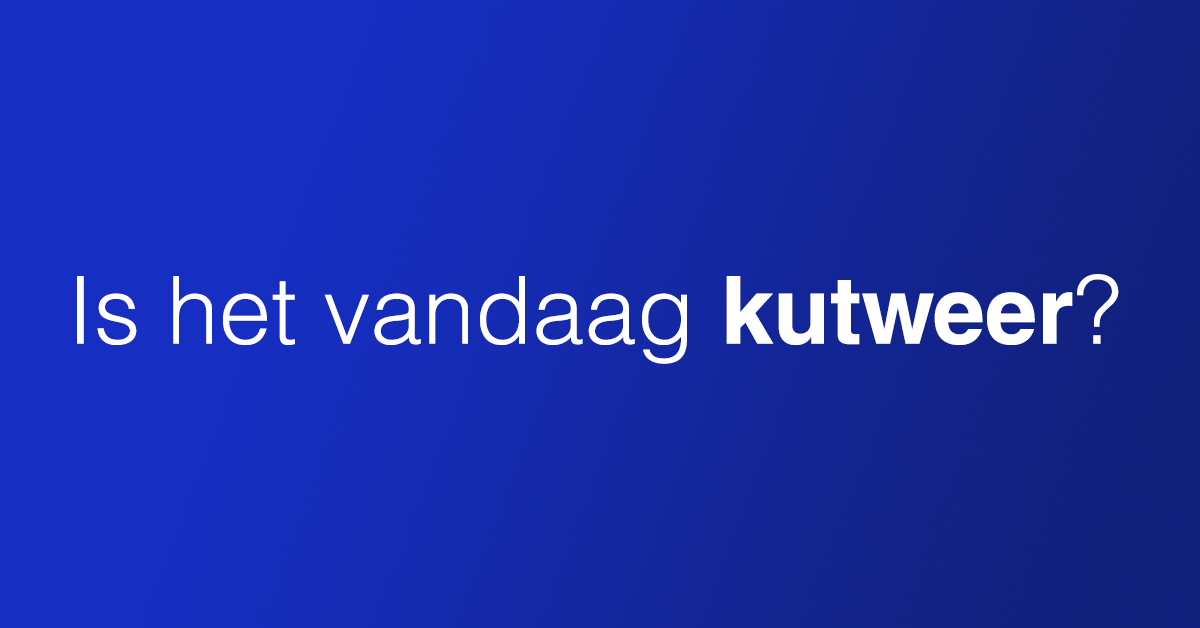
<style>
.page{position:relative;width:1200px;height:628px}
.page>*{position:absolute;margin:0}
.t1{font:94px "HelveticaLTStd-Light";color:#ffffff}
.t2{font:94px "HelveticaLTStd-Bold";color:#ffffff}
</style>
<div class="page">
<p class="t1" style="left:77px;top:274px;width:1042px;height:90px">Is het vandaag <span class="t2">kutweer</span>?</p>
</div>
